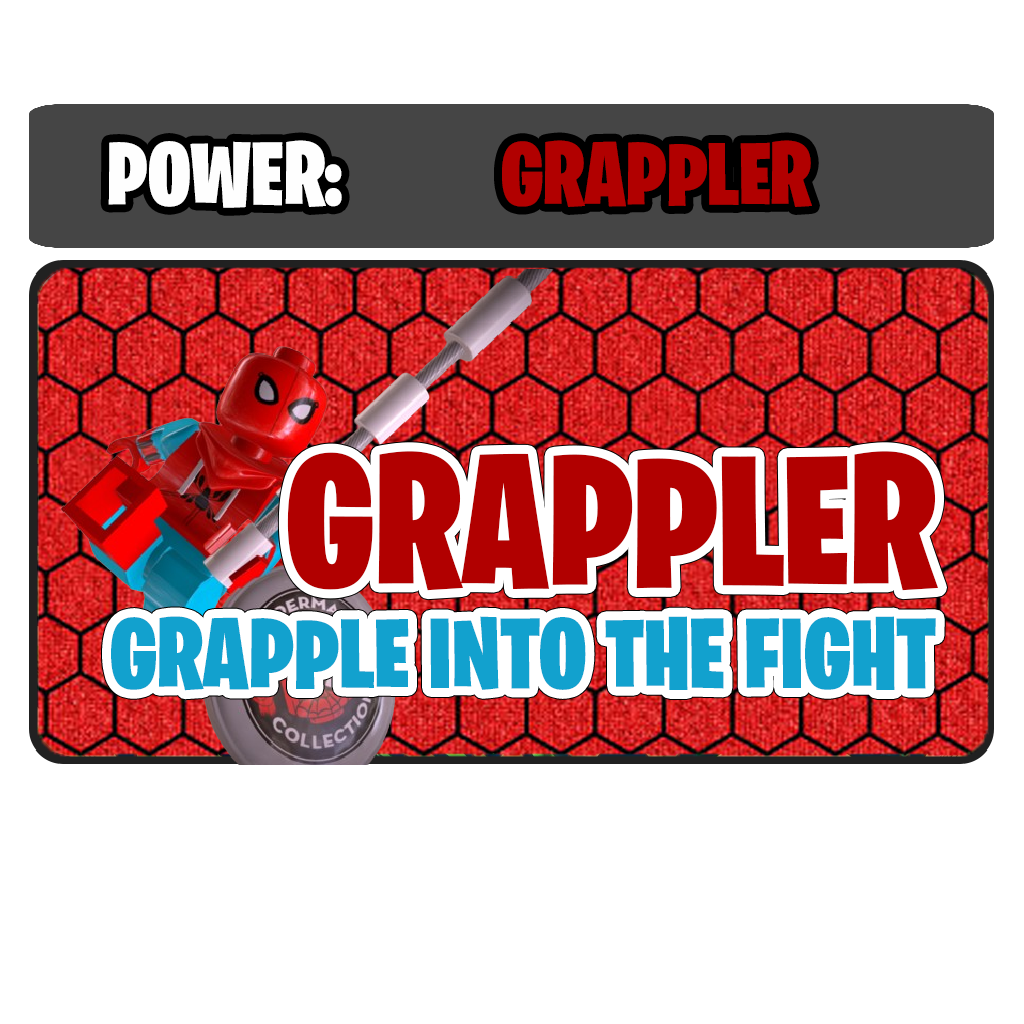
<style>
.page{position:relative;width:1024px;height:1024px;background:#ffffff}
.page>*{position:absolute;margin:0}
.t1{font:90px "BurbankBigCondensed-Black";color:#fefefe}
.t2{font:90px "BurbankBigCondensed-Black";color:#b10000}
.t3{font:188.1px "BurbankBigCondensed-Black";color:#b10000}
.t4{font:100px "BurbankBigCondensed-Black";color:#12a1ce}
</style>
<div class="page">
<p class="t1" style="left:108px;top:140px;width:234px;height:68px">POWER:</p>
<p class="t2" style="left:502px;top:140px;width:310px;height:67px">GRAPPLER</p>
<p class="t3" style="left:287px;top:451px;width:652px;height:140px">GRAPPLER</p>
<p class="t4" style="left:111px;top:616px;width:825px;height:75px">GRAPPLE INTO THE FIGHT</p>
</div>
